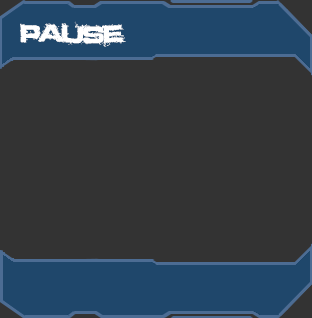
<style>
.page{position:relative;width:312px;height:318px;background:#333333}
.page>*{position:absolute;margin:0}
.t1{font:24px "Defused-ExtendedBold";color:#ffffff}
</style>
<div class="page">
<p class="t1" style="left:20px;top:21px;width:106px;height:26px">Pause</p>
</div>
